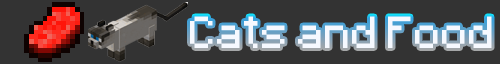
<style>
.page{position:relative;width:500px;height:64px;background:#333333}
.page>*{position:absolute;margin:0}
.t1{font:36px "Minecraft-W4P";color:#f6f9ff}
</style>
<div class="page">
<p class="t1" style="left:190px;top:16px;width:302px;height:32px">Cats and Food</p>
</div>
